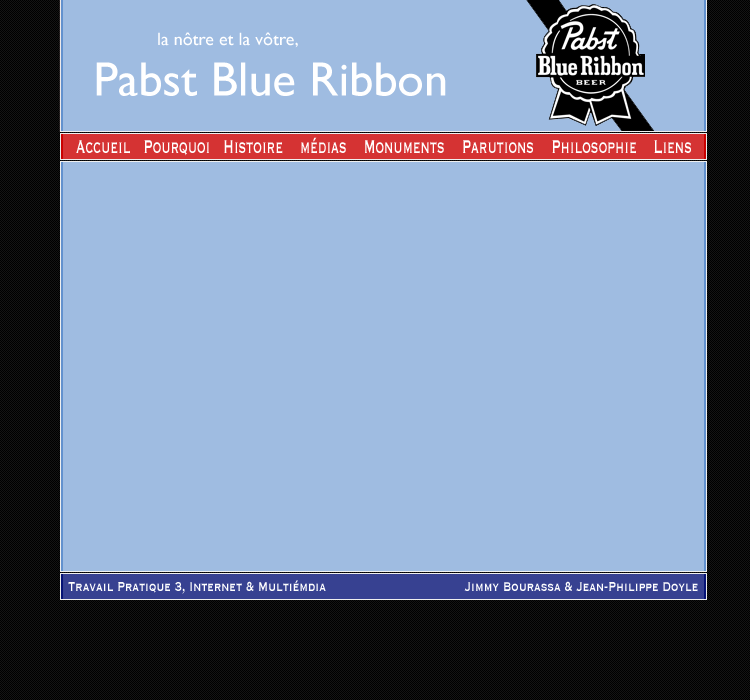
<style>
.page{position:relative;width:750px;height:700px;background:#9fbce1}
.page>*{position:absolute;margin:0}
.t1{font:18px "GillSans";color:#ffffff}
.t2{font:48.4px "GillSans";color:#ffffff}
.t3{font:23.9px "Copperplate";color:#ffffff;scale:0.59 1}
.t4{font:16.8px "Copperplate";color:#ffffff;scale:0.71 1}
</style>
<div class="page">
<p class="t1" style="left:158px;top:32px;width:140px;height:16px">la nôtre et la vôtre,</p>
<p class="t2" style="left:96px;top:62px;width:350px;height:34px">Pabst Blue Ribbon</p>
<p class="t3" style="left:76px;top:137px;width:615px;height:19px">Accueil   Pourquoi   Histoire    médias    Monuments    Parutions    Philosophie    Liens</p>
<p class="t4" style="left:68px;top:580px;width:258px;height:14px">Travail Pratique 3, Internet &amp; Multiémdia</p>
<p class="t4" style="left:464px;top:581px;width:234px;height:11px">Jimmy Bourassa &amp; Jean-Philippe Doyle</p>
</div>
